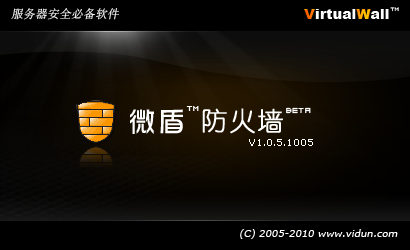
<style>
.page{position:relative;width:410px;height:250px;background:#000000}
.page>*{position:absolute;margin:0}
.t1{font:12px "SimSun";font-style:italic}
.t2{font:13.6px "Arial-Black";letter-spacing:0.025em;color:#ffffff}
.t3{font:13.6px "Arial-Black";letter-spacing:0.025em;color:#ff9900}
.t4{font:4.2px "04b08";letter-spacing:0.025em}
.t5{font:28px "DFHuaZong-W5-WINP-BF";letter-spacing:0.05em;color:#ffffff}
.t6{font:6px "04b08";letter-spacing:0.05em;color:#ffffff}
.t7{font:26px "YouYuan";letter-spacing:0.05em;color:#ffffff;font-weight:bold}
.t8{font:9px "Verdana";color:#ffffff}
.t9{font:10px "Verdana";color:#ffffff;font-style:italic}
</style>
<div class="page">
<p class="t1" style="left:11px;top:8px;width:108px;height:12px">服务器安全必备软件</p>
<p class="t2" style="left:304px;top:9px;width:85px;height:10px"><span class="t3">V</span>irtual<span class="t3">W</span>all</p>
<p class="t4" style="left:390px;top:7px;width:9px;height:5px">TM</p>
<p class="t5" style="left:130px;top:109px;width:53px;height:25px">微盾</p>
<p class="t6" style="left:186px;top:106px;width:13px;height:5px">TM</p>
<p class="t7" style="left:202px;top:108px;width:81px;height:26px">防火墙</p>
<p class="t6" style="left:286px;top:107px;width:25px;height:7px">BETA</p>
<p class="t8" style="left:249px;top:139px;width:64px;height:7px">V1.0.5.1005</p>
<p class="t9" style="left:240px;top:229px;width:158px;height:10px">(C) 2005-2010 www.vidun.com</p>
</div>
